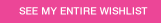
<style>
.page{position:relative;width:161px;height:23px;background:#ec4697}
.page>*{position:absolute;margin:0}
.t1{font:10px "HelveticaNeue-Medium";letter-spacing:0.025em;color:#ffffff}
</style>
<div class="page">
<p class="t1" style="left:19px;top:7px;width:129px;height:8px">SEE MY ENTIRE WISHLIST</p>
</div>
